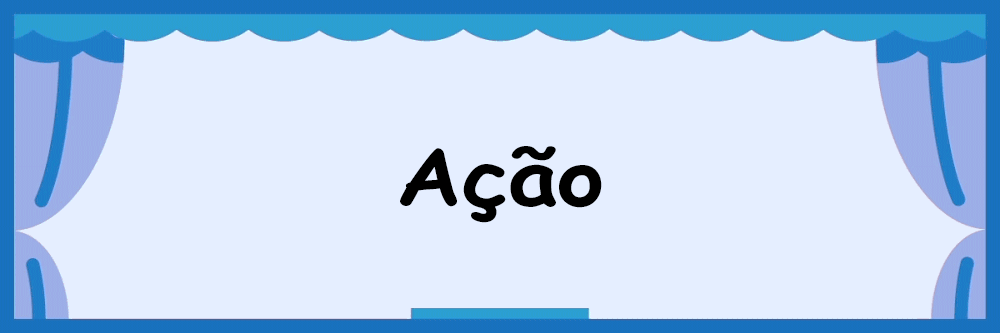
<style>
.page{position:relative;width:1000px;height:333px;background:#e5eeff}
.page>*{position:absolute;margin:0}
.t1{font:78.8px "ComicSansMS-Bold";color:#000000;scale:1.14 1}
</style>
<div class="page">
<p class="t1" style="left:400px;top:146px;width:202px;height:77px">Ação</p>
</div>
